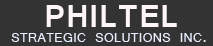
<style>
.page{position:relative;width:213px;height:46px;background:#333333}
.page>*{position:absolute;margin:0}
.t1{font:33.6px "Vrinda-Bold";letter-spacing:0.025em;color:#fdf5f6;text-transform:uppercase}
.t2{font:14px "Vrinda";letter-spacing:0.025em;color:#e7eefd;text-transform:uppercase}
</style>
<div class="page">
<p class="t1" style="left:46px;top:5px;width:131px;height:22px">PhILTEL</p>
<p class="t2" style="left:11px;top:33px;width:195px;height:9px">Strategic Solutions Inc.</p>
</div>
